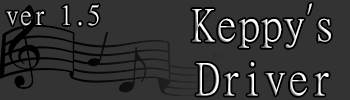
<style>
.page{position:relative;width:350px;height:100px;background:#333333}
.page>*{position:absolute;margin:0}
.t1{font:27.1px "MingLiU-ExtB";color:#ffffff}
.t2{font:45.2px "MingLiU-ExtB";color:#ffffff}
.t3{font:45.2px "KozGoPr6N-ExtraLight";color:#ffffff}
</style>
<div class="page">
<p class="t1" style="left:6px;top:4px;width:93px;height:22px">ver 1.5</p>
<p class="t2" style="left:192px;top:3px;width:139px;height:93px;text-align:center">Keppy<span class="t3">’</span>s<br>Driver</p>
</div>
